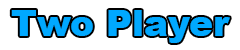
<style>
.page{position:relative;width:240px;height:50px;background:#ffffff}
.page>*{position:absolute;margin:0}
.t1{font:36px "Arial-Black";color:#00a8ff}
</style>
<div class="page">
<p class="t1" style="left:11px;top:10px;width:219px;height:33px">Two Player</p>
</div>
